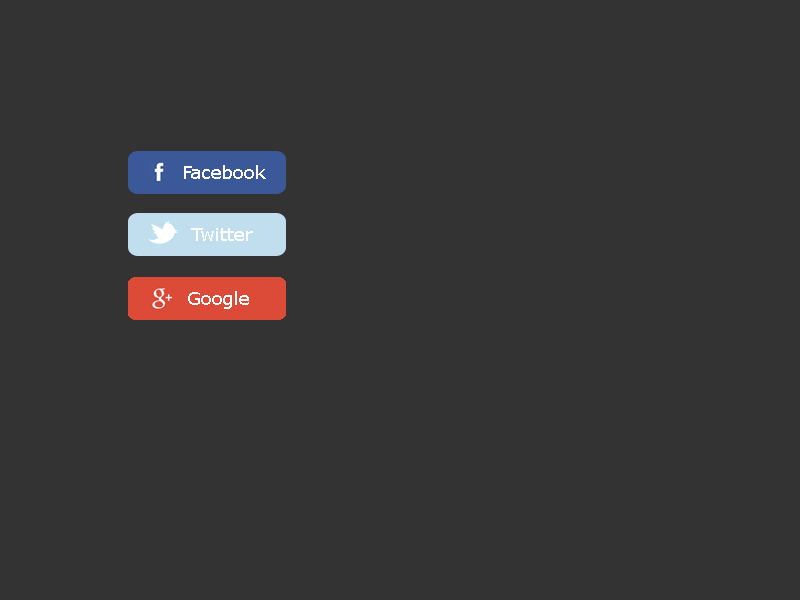
<style>
.page{position:relative;width:800px;height:600px;background:#333333}
.page>*{position:absolute;margin:0}
.t1{font:18px "Verdana";color:#ffffff}
</style>
<div class="page">
<p class="t1" style="left:184px;top:165px;width:82px;height:14px">Facebook</p>
<p class="t1" style="left:191px;top:228px;width:62px;height:13px">Twitter</p>
<p class="t1" style="left:188px;top:291px;width:61px;height:18px">Google</p>
</div>
